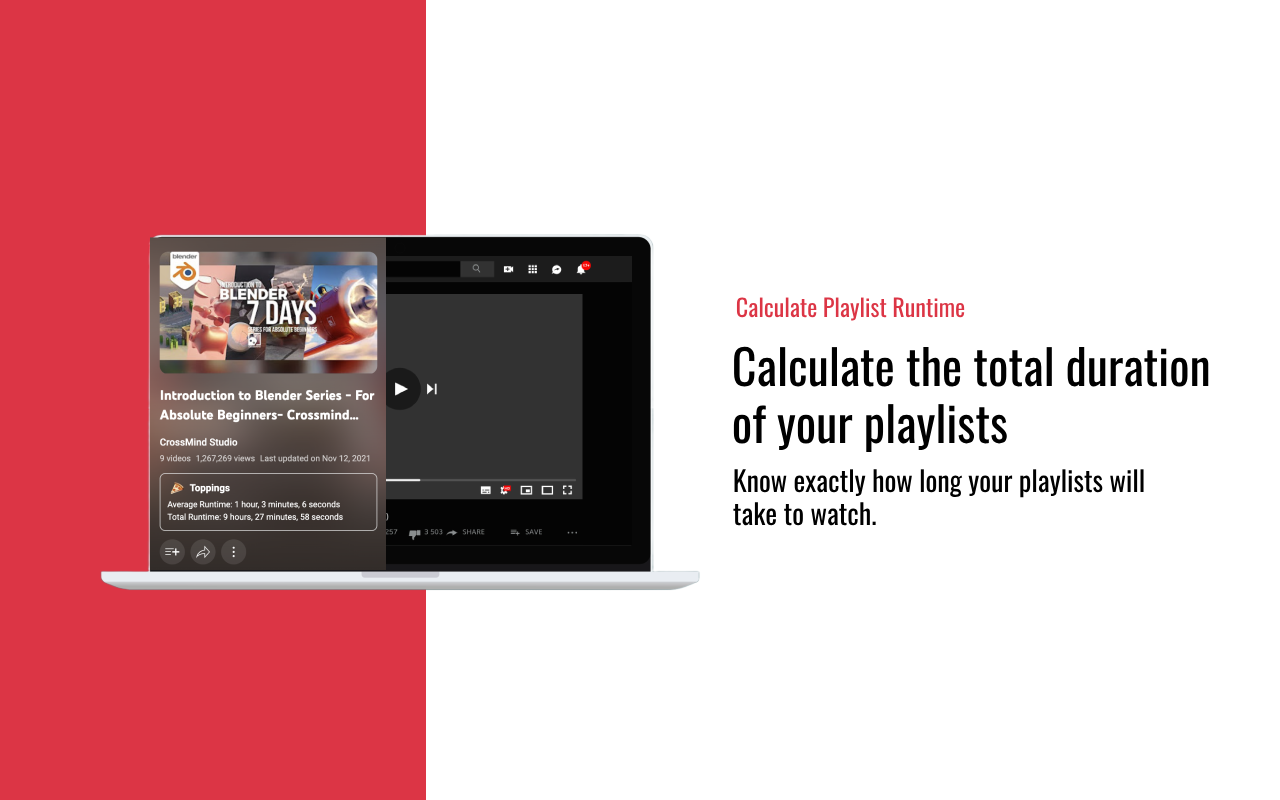
<style>
.page{position:relative;width:1280px;height:800px;background:#ffffff}
.page>*{position:absolute;margin:0}
.t1{font:24px "Oswald-Regular";color:#dc3545}
.t2{font:48px "Oswald-Regular";color:#000000}
.t3{font:28px "Oswald-Regular";color:#000000}
</style>
<div class="page">
<p class="t1" style="left:736px;top:297px;width:229px;height:24px">Calculate Playlist Runtime</p>
<p class="t2" style="left:733px;top:346px;width:476px;height:107px">Calculate the total duration <br>of your playlists</p>
<p class="t3" style="left:733px;top:469px;width:411px;height:57px">Know exactly how long your playlists will <br>take to watch.</p>
</div>
